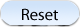
<style>
.page{position:relative;width:80px;height:27px}
.page>*{position:absolute;margin:0}
.t1{font:16.7px "MyriadPro-Regular";color:#000000}
</style>
<div class="page">
<p class="t1" style="left:22px;top:8px;width:36px;height:13px">Reset</p>
</div>
